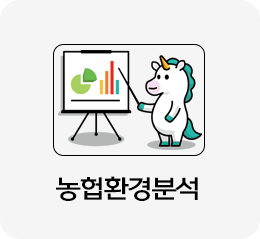
<style>
.page{position:relative;width:260px;height:239px;background:#f5f5f5}
.page>*{position:absolute;margin:0}
.t1{font:25px "ONEMobileBold";letter-spacing:-0.05em;color:#000000;scale:1.1 1}
</style>
<div class="page">
<p class="t1" style="left:56px;top:176px;width:142px;height:25px">농헙환경분석</p>
</div>
